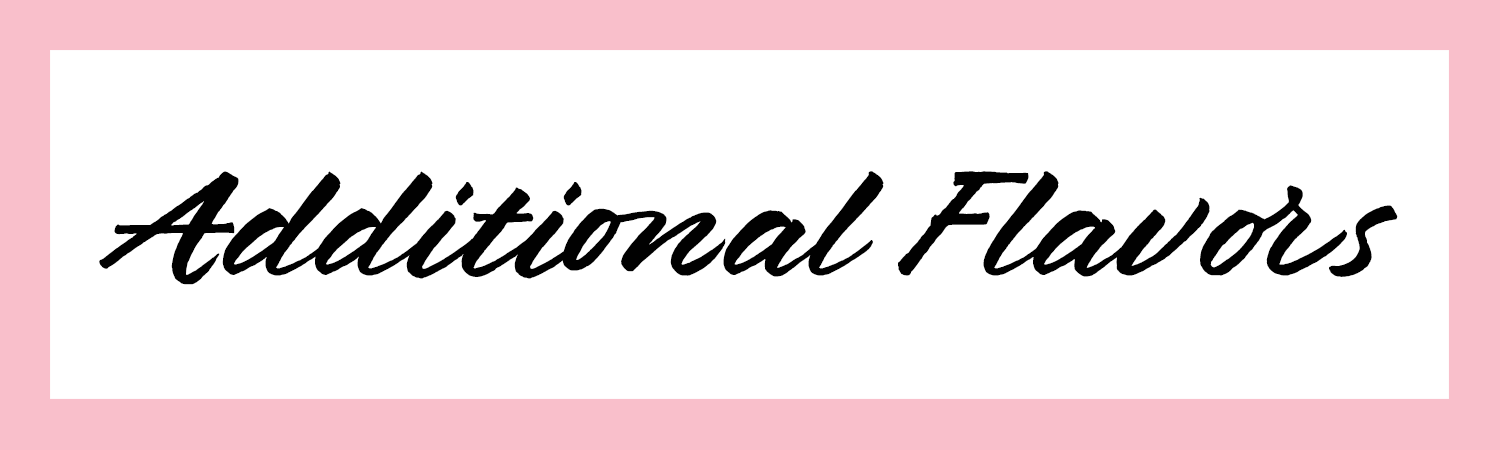
<style>
.page{position:relative;width:1500px;height:450px;background:#ffffff}
.page>*{position:absolute;margin:0}
.t1{font:156.9px "Brushland-Regular";color:#010101;font-style:italic}
</style>
<div class="page">
<p class="t1" style="left:99px;top:171px;width:1299px;height:114px">Additional Flavors</p>
</div>
